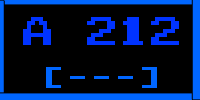
<style>
.page{position:relative;width:200px;height:100px;background:#000000}
.page>*{position:absolute;margin:0}
.t1{font:40px "Zig";color:#0033ff}
.t2{font:30px "Zig";color:#0066ff}
</style>
<div class="page">
<p class="t1" style="left:23px;top:17px;width:156px;height:28px">a 212</p>
<p class="t2" style="left:46px;top:67px;width:111px;height:21px">[---]</p>
</div>
